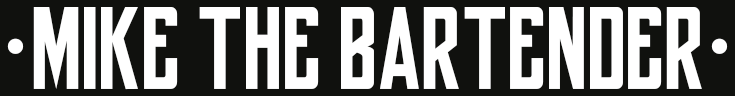
<style>
.page{position:relative;width:735px;height:96px;background:#10110e}
.page>*{position:absolute;margin:0}
.t1{font:120px "yorkwhiteletter";color:#10110e}
</style>
<div class="page">
<p class="t1" style="left:0px;top:0px;width:736px;height:96px">|MIKE!THE!BARTENDER|</p>
</div>
